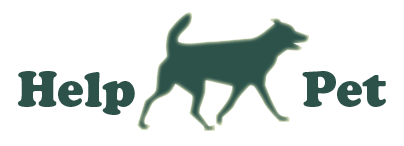
<style>
.page{position:relative;width:404px;height:146px;background:#ffffff}
.page>*{position:absolute;margin:0}
.t1{font:48px "CooperBlackStd";color:#2c524a}
</style>
<div class="page">
<p class="t1" style="left:18px;top:71px;width:368px;height:44px">Help           Pet</p>
</div>
